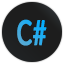
<style>
.page{position:relative;width:64px;height:64px;background:#1d1d1d}
.page>*{position:absolute;margin:0}
.t1{font:34.2px "Lato-Semibold";font-weight:bold;scale:0.68 1}
</style>
<div class="page">
<p class="t1" style="left:17px;top:19px;width:30px;height:27px">C#</p>
</div>
